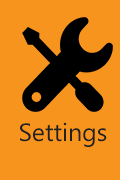
<style>
.page{position:relative;width:120px;height:180px;background:#f7941d}
.page>*{position:absolute;margin:0}
.t1{font:25px "SegoeUI";color:#202125}
</style>
<div class="page">
<p class="t1" style="left:20px;top:122px;width:87px;height:25px">Settings</p>
</div>
